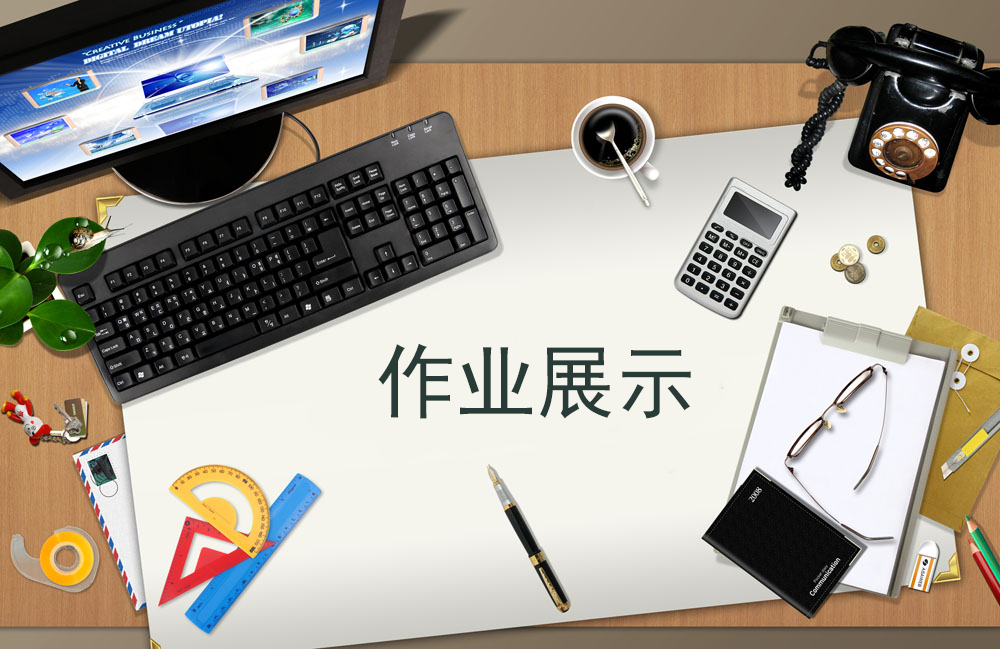
<style>
.page{position:relative;width:1000px;height:649px}
.page>*{position:absolute;margin:0}
.t1{font:80px "SimHei";color:#283b36}
</style>
<div class="page">
<p class="t1" style="left:378px;top:343px;width:313px;height:76px">作业展示</p>
</div>
